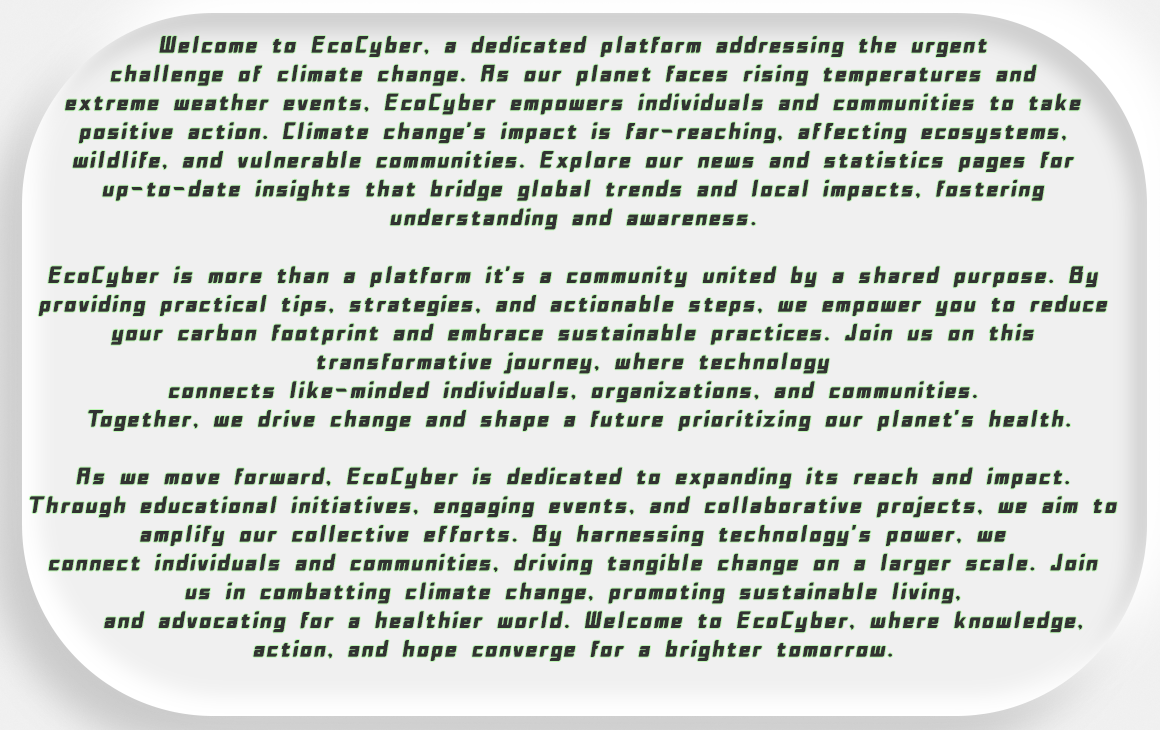
<style>
.page{position:relative;width:1160px;height:730px;background:#f0f0f0}
.page>*{position:absolute;margin:0}
.t1{font:24px "Tempo";letter-spacing:0.09em;color:#323232;scale:1.16 1}
</style>
<div class="page">
<p class="t1" style="left:29px;top:36px;width:1088px;height:625px;text-align:center">Welcome to EcoCyber, a dedicated platform addressing the urgent <br>challenge of climate change. As our planet faces rising temperatures and <br>extreme weather events, EcoCyber empowers individuals and communities to take <br>positive action. Climate change's impact is far-reaching, affecting ecosystems, <br>wildlife, and vulnerable communities. Explore our news and statistics pages for up-to-date insights that bridge global trends and local impacts, fostering <br>understanding and awareness.<br><br>EcoCyber is more than a platform—it's a community united by a shared purpose. By providing practical tips, strategies, and actionable steps, we empower you to reduce your carbon footprint and embrace sustainable practices. Join us on this <br>transformative journey, where technology <br>connects like-minded individuals, organizations, and communities.<br> Together, we drive change and shape a future prioritizing our planet's health.<br><br>As we move forward, EcoCyber is dedicated to expanding its reach and impact. Through educational initiatives, engaging events, and collaborative projects, we aim to amplify our collective efforts. By harnessing technology's power, we <br>connect individuals and communities, driving tangible change on a larger scale. Join us in combatting climate change, promoting sustainable living,<br>  and advocating for a healthier world. Welcome to EcoCyber, where knowledge, action, and hope converge for a brighter tomorrow.</p>
</div>
